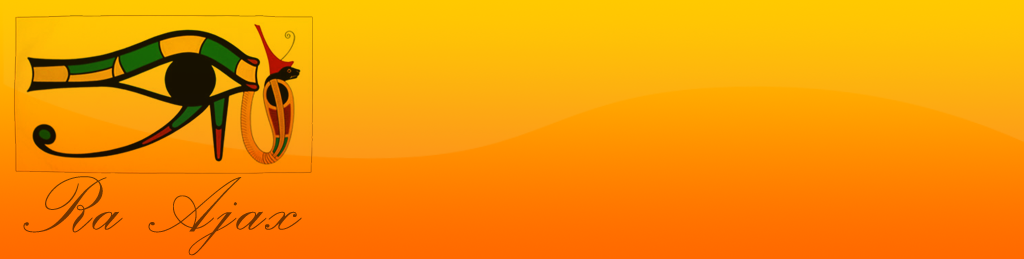
<style>
.page{position:relative;width:1024px;height:259px}
.page>*{position:absolute;margin:0}
.t1{font:99.9px "PalaceScriptMT";letter-spacing:0.04em;color:#703300}
</style>
<div class="page">
<p class="t1" style="left:23px;top:176px;width:279px;height:80px">Ra Ajax</p>
</div>
